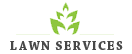
<style>
.page{position:relative;width:132px;height:54px;background:#ffffff}
.page>*{position:absolute;margin:0}
.t1{font:13px "ChaparralPro-Bold";letter-spacing:0.09em;color:#484848}
</style>
<div class="page">
<p class="t1" style="left:10px;top:41px;width:113px;height:9px">LAWN SERVICES</p>
</div>
